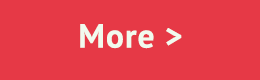
<style>
.page{position:relative;width:260px;height:80px;background:#e63946}
.page>*{position:absolute;margin:0}
.t1{font:33.3px "PTSans-Bold";letter-spacing:0.03em;color:#f1faee}
</style>
<div class="page">
<p class="t1" style="left:80px;top:24px;width:102px;height:25px">More &gt;</p>
</div>
